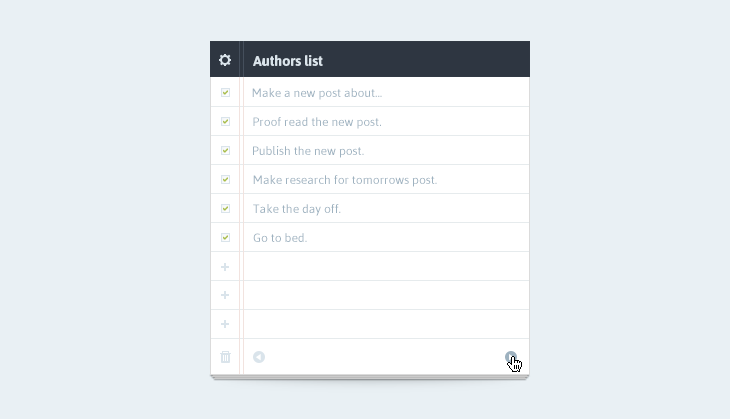
<style>
.page{position:relative;width:730px;height:419px;background:#e9f0f4}
.page>*{position:absolute;margin:0}
.t1{font:14px "Asap-Bold";color:#dae4eb}
.t2{font:12px "Asap-Regular";color:#9eb2c0}
.t3{font:6px "SSStandard";color:#a8bd44}
</style>
<div class="page">
<p class="t1" style="left:253px;top:54px;width:70px;height:12px">Authors list</p>
<p class="t2" style="left:252px;top:88px;width:130px;height:12px">Make a new post about...</p>
<p class="t3" style="left:223px;top:90px;width:5px;height:5px">✓</p>
<p class="t3" style="left:223px;top:119px;width:5px;height:5px">✓</p>
<p class="t2" style="left:253px;top:117px;width:128px;height:12px">Proof read the new post.</p>
<p class="t3" style="left:223px;top:148px;width:5px;height:5px">✓</p>
<p class="t2" style="left:253px;top:146px;width:111px;height:12px">Publish the new post.</p>
<p class="t3" style="left:223px;top:177px;width:5px;height:5px">✓</p>
<p class="t2" style="left:253px;top:175px;width:184px;height:12px">Make research for tomorrows post.</p>
<p class="t3" style="left:223px;top:206px;width:5px;height:5px">✓</p>
<p class="t2" style="left:253px;top:204px;width:88px;height:12px">Take the day off.</p>
<p class="t2" style="left:253px;top:233px;width:54px;height:9px">Go to bed.</p>
<p class="t3" style="left:223px;top:235px;width:5px;height:5px">✓</p>
</div>
